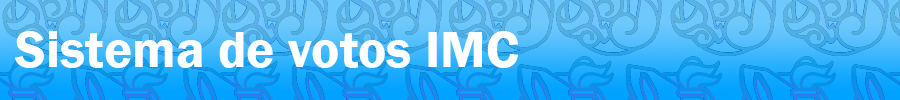
<style>
.page{position:relative;width:900px;height:100px}
.page>*{position:absolute;margin:0}
.t1{font:53px "FranklinGothic-Demi";color:#ffffff}
</style>
<div class="page">
<p class="t1" style="left:15px;top:31px;width:503px;height:37px">Sistema de votos IMC</p>
</div>
